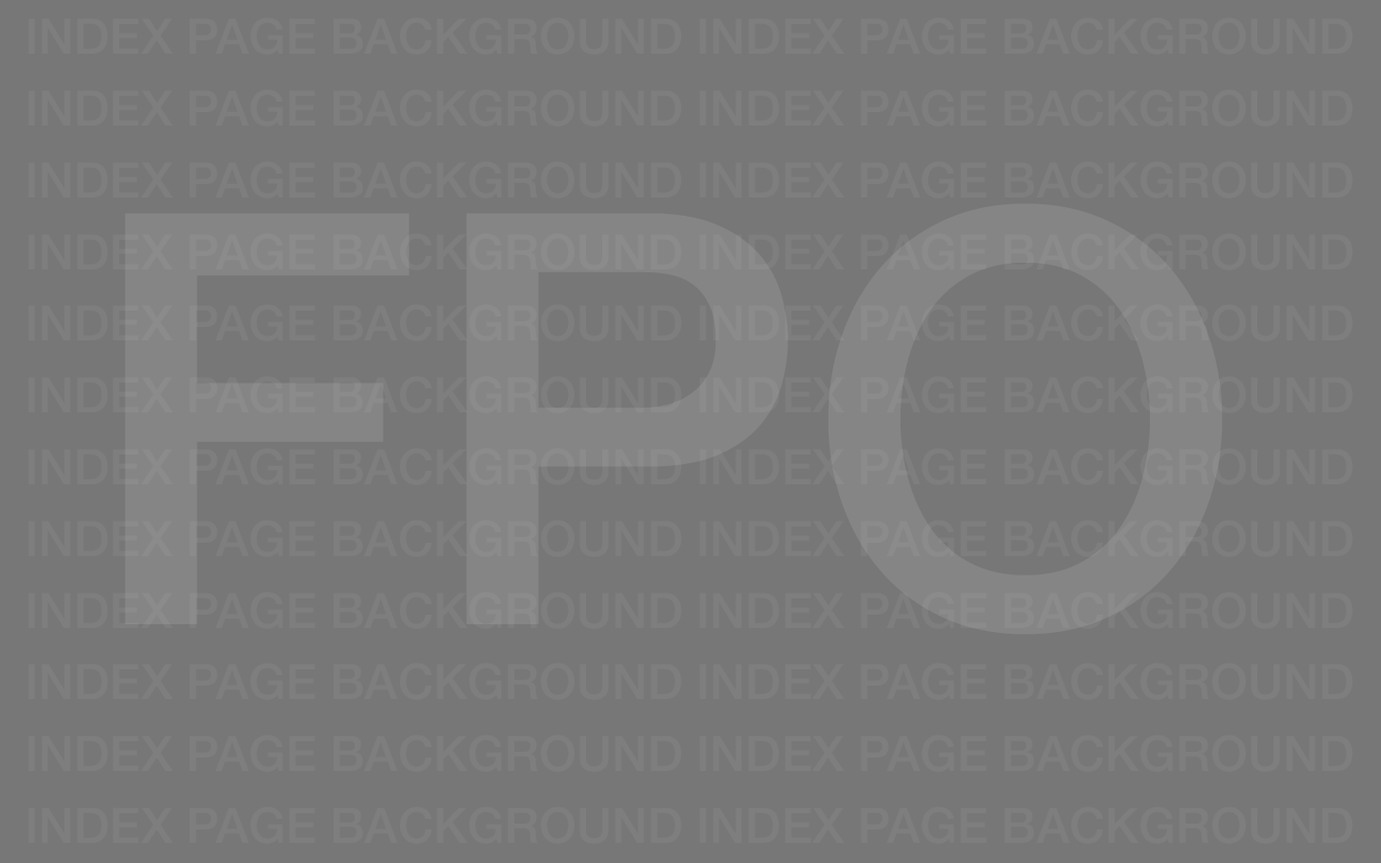
<style>
.page{position:relative;width:1381px;height:863px;background:#777777}
.page>*{position:absolute;margin:0}
.t1{font:49.2px/71.8px "HelveticaNeue-Medium";color:#7e7e7e}
.t2{font:575.5px "HelveticaNeue-Medium";color:#858585}
</style>
<div class="page">
<p class="t1" style="left:28px;top:17px;width:1325px;height:827px">INDEX PAGE BACKGROUND INDEX PAGE BACKGROUND INDEX PAGE BACKGROUND INDEX PAGE BACKGROUND INDEX PAGE BACKGROUND INDEX PAGE BACKGROUND INDEX PAGE BACKGROUND INDEX PAGE BACKGROUND INDEX PAGE BACKGROUND INDEX PAGE BACKGROUND INDEX PAGE BACKGROUND INDEX PAGE BACKGROUND INDEX PAGE BACKGROUND INDEX PAGE BACKGROUND INDEX PAGE BACKGROUND INDEX PAGE BACKGROUND INDEX PAGE BACKGROUND INDEX PAGE BACKGROUND INDEX PAGE BACKGROUND INDEX PAGE BACKGROUND INDEX PAGE BACKGROUND INDEX PAGE BACKGROUND INDEX PAGE BACKGROUND INDEX PAGE BACKGROUND INDEX PAGE BACKGROUND</p>
<p class="t2" style="left:125px;top:203px;width:1098px;height:432px">FPO</p>
</div>
